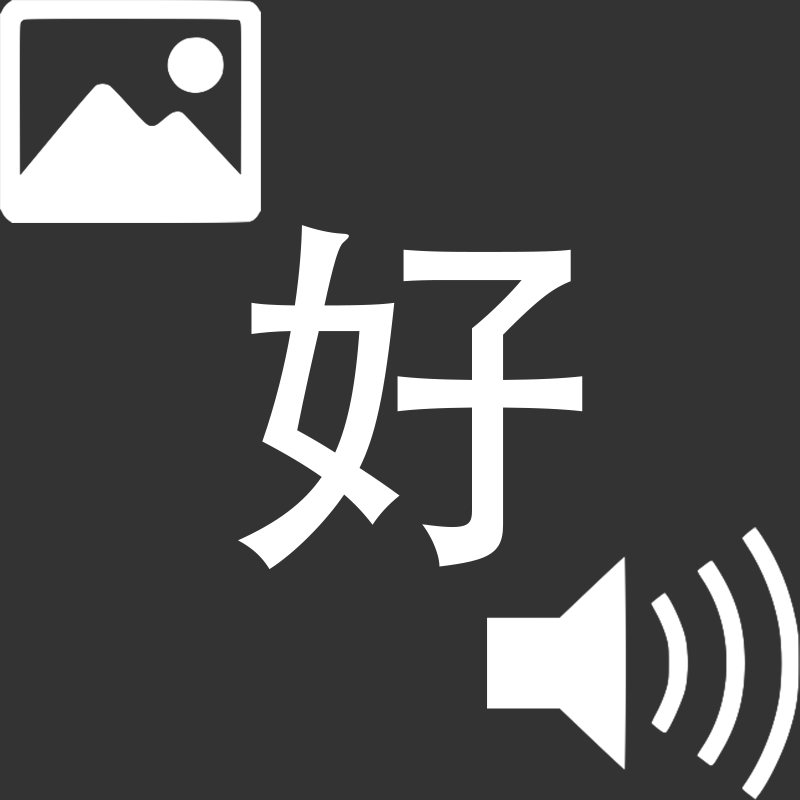
<style>
.page{position:relative;width:800px;height:800px;background:#333333}
.page>*{position:absolute;margin:0}
.t1{font:373.2px "AdobeHeitiStd-Regular";color:#ffffff}
</style>
<div class="page">
<p class="t1" style="left:238px;top:225px;width:345px;height:345px">好</p>
</div>
